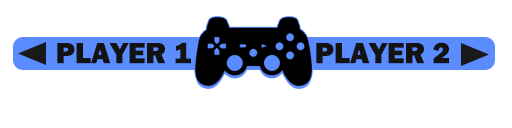
<style>
.page{position:relative;width:512px;height:128px;background:#ffffff}
.page>*{position:absolute;margin:0}
.t1{font:30px "FranklinGothic-Heavy";color:#141313}
</style>
<div class="page">
<p class="t1" style="left:57px;top:42px;width:134px;height:22px">PLAYER 1</p>
<p class="t1" style="left:316px;top:42px;width:133px;height:22px">PLAYER 2</p>
</div>
